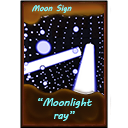
<style>
.page{position:relative;width:128px;height:128px;background:#ffffff}
.page>*{position:absolute;margin:0}
.t1{font:8px "MVBoli";color:#7fffff}
.t2{font:10.7px "MVBoli";color:#7fffff}
</style>
<div class="page">
<p class="t1" style="left:32px;top:4px;width:40px;height:9px">Moon Sign</p>
<p class="t2" style="left:38px;top:98px;width:54px;height:23px;text-align:center">“Moonlight<br>ray”</p>
</div>
